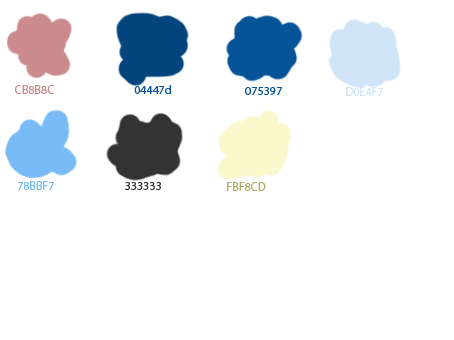
<style>
.page{position:relative;width:454px;height:340px;background:#ffffff}
.page>*{position:absolute;margin:0}
.t1{font:12px "MyriadPro-Regular";color:#cb8b8c}
.t2{font:12px "MyriadPro-Regular";color:#075397}
.t3{font:12px "MyriadPro-Regular";color:#d0e4f7}
.t4{font:12px "MyriadPro-Regular";color:#78bbf7}
.t5{font:12px "MyriadPro-Regular";color:#333333}
.t6{font:12px "MyriadPro-Regular";color:#afaa63}
</style>
<div class="page">
<p class="t1" style="left:15px;top:85px;width:39px;height:9px">CB8B8C</p>
<p class="t2" style="left:134px;top:85px;width:37px;height:9px">04447d</p>
<p class="t2" style="left:245px;top:87px;width:37px;height:8px">075397</p>
<p class="t3" style="left:346px;top:87px;width:38px;height:9px">D0E4F7</p>
<p class="t4" style="left:17px;top:181px;width:37px;height:9px">78BBF7</p>
<p class="t5" style="left:125px;top:182px;width:36px;height:8px">333333</p>
<p class="t6" style="left:227px;top:182px;width:39px;height:9px">FBF8CD</p>
</div>
